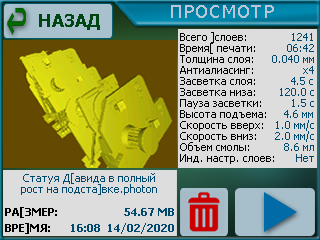
<style>
.page{position:relative;width:320px;height:240px;background:#dddddd}
.page>*{position:absolute;margin:0}
.t1{font:18px "Tahoma";letter-spacing:0.075em;color:#bac5d5}
.t2{font:18px "Tahoma-Bold";color:#004612}
.t3{font:11px/11px "Tahoma";color:#000000}
.t4{font:11px/11px "Tahoma";color:#00496c}
.t5{font:11px/16px "Tahoma-Bold";color:#000000}
.t6{font:11px/16px "Tahoma-Bold";color:#00496c}
</style>
<div class="page">
<p class="t1" style="left:171px;top:5px;width:103px;height:13px">ПРОСМОТР</p>
<p class="t2" style="left:39px;top:14px;width:61px;height:16px">НАЗАД</p>
<p class="t3" style="left:180px;top:32px;width:94px;height:132px">Всего ]слоев:<br>Время[ печати:<br>Толщина слоя:<br>Антиалиасинг:<br>Засветка слоя:<br>Засветка низа:<br>Пауза засветки:<br>Высота подъема:<br>Скорость вверх:<br>Скорость вниз:<br>Объем смолы:<br>Инд. настр. слоев:</p>
<p class="t4" style="left:272px;top:33px;width:42px;height:129px;text-align:right">1241<br>06:42<br>0.040 мм<br>x4<br>4.5 с<br>120.0 с<br>1.5 с<br>4.6 мм<br>1.0 мм/с<br>2.0 мм/с<br>8.6 мл<br>Нет</p>
<p class="t4" style="left:21px;top:173px;width:136px;height:22px;text-align:center">Статуя Д[авида в полный<br>рост на подста]вке.photon</p>
<p class="t5" style="left:5px;top:207px;width:52px;height:27px">РА[ЗМЕР:<br>ВРЕ]МЯ:</p>
<p class="t6" style="left:71px;top:208px;width:103px;height:26px;text-align:right">54.67 MB<br>16:08  14/02/2020</p>
</div>
